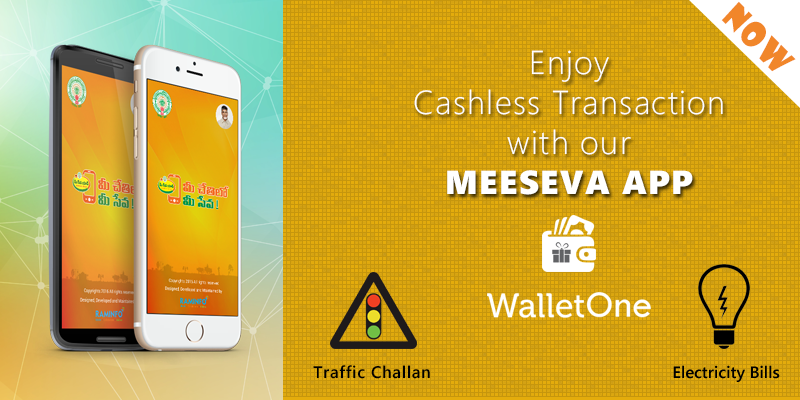
<style>
.page{position:relative;width:800px;height:400px;background:#c6960d}
.page>*{position:absolute;margin:0}
.t1{font:33.3px "ShowcardGothic-Reg";letter-spacing:0.04em;color:#f1862a}
.t2{font:33.3px "SegoeWP-Light";letter-spacing:0.04em;color:#ffffff}
.t3{font:33.3px "SegoeWP-Black";letter-spacing:0.04em;color:#ffffff}
.t4{font:16.7px "SegoeWP-Semibold";letter-spacing:0.04em;color:#000000}
</style>
<div class="page">
<p class="t1" style="left:721px;top:1px;width:75px;height:71px;rotate:45deg">NOW</p>
<p class="t2" style="left:414px;top:50px;width:309px;height:145px;text-align:center">Enjoy<br>Cashless Transaction<br>with our<br><span class="t3">MEESEVA APP</span></p>
<p class="t4" style="left:313px;top:365px;width:117px;height:14px">Traffic Challan</p>
</div>
